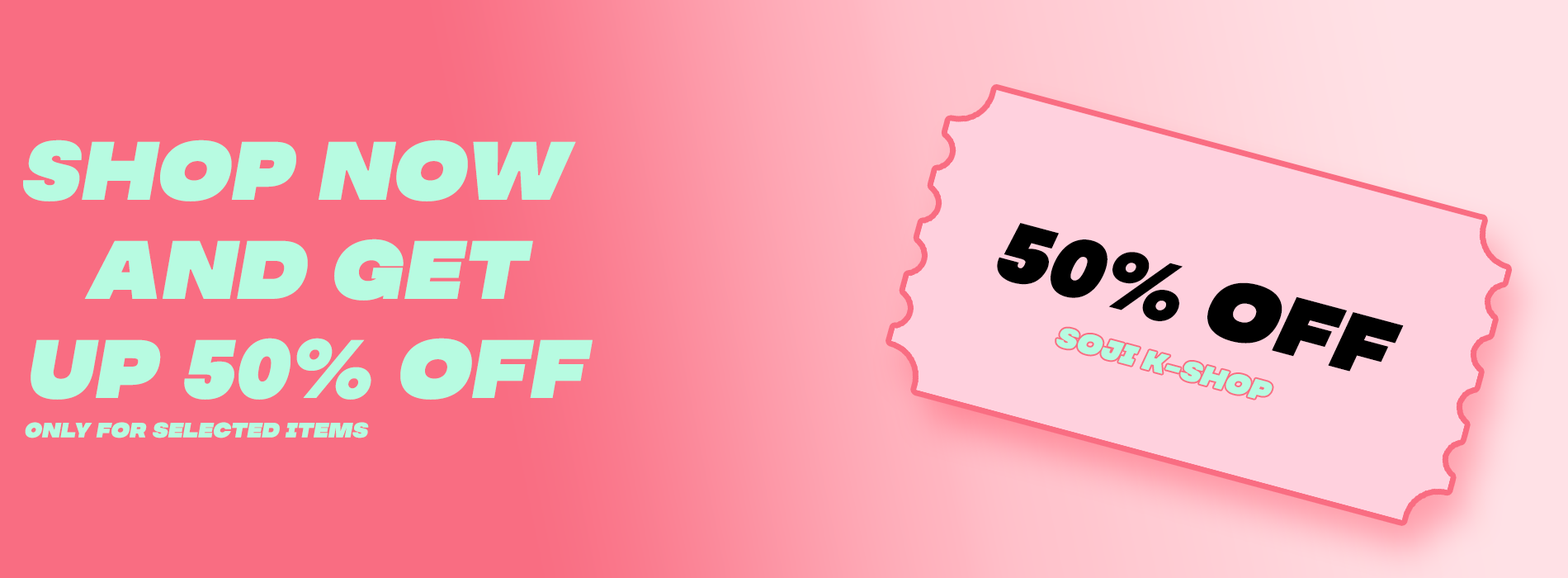
<style>
.page{position:relative;width:1568px;height:578px;background:#f96d82}
.page>*{position:absolute;margin:0}
.t1{font:82.5px "MADESoulmaze";color:#b7fbe1;font-style:italic}
.t2{font:82.5px "MADESoulmaze";color:#000000;font-style:italic}
.t3{font:27.5px "MADESoulmaze";color:#b7fbe1;font-style:italic}
.t4{font:20.6px "MADESoulmaze";color:#b7fbe1;font-style:italic}
</style>
<div class="page">
<p class="t1" style="left:23px;top:139px;width:570px;height:260px;text-align:center">Shop now <br>and get<br> up 50% off</p>
<p class="t2" style="left:997px;top:223px;width:407px;height:148px;rotate:15deg">50% off</p>
<p class="t3" style="left:1056px;top:328px;width:217px;height:71px;rotate:15deg">soji k-shop</p>
<p class="t4" style="left:25px;top:422px;width:344px;height:16px">Only for selected items</p>
</div>
